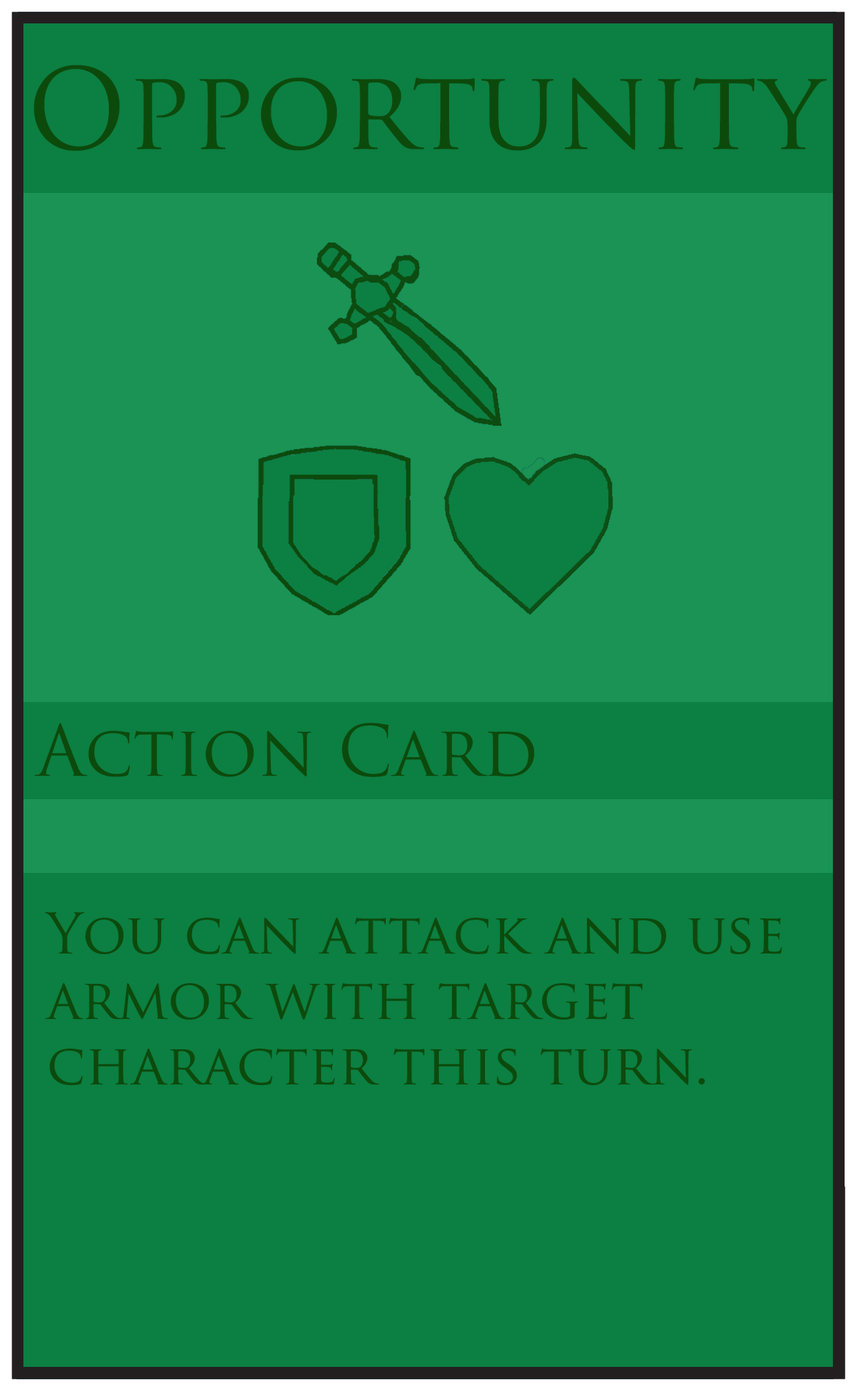
<style>
.page{position:relative;width:857px;height:1391px;background:#0c7f42}
.page>*{position:absolute;margin:0}
.t1{font:109.1px "TrajanPro-Regular";color:#0c4a0c}
.t2{font:68.9px "TrajanPro-Regular";color:#0c4a0c}
.t3{font:54.5px "TrajanPro-Regular";color:#0c4a0c}
</style>
<div class="page">
<p class="t1" style="left:34px;top:65px;width:793px;height:86px">Opportunity</p>
<p class="t2" style="left:34px;top:723px;width:501px;height:54px">Action Card</p>
<p class="t3" style="left:45px;top:912px;width:737px;height:173px">You can attack and use <br>armor with target <br>character this turn.</p>
</div>
